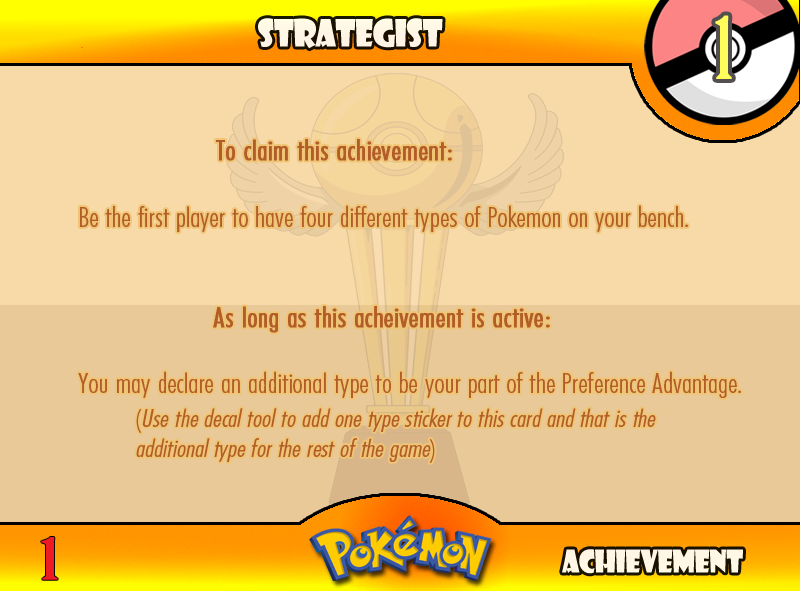
<style>
.page{position:relative;width:800px;height:591px;background:#f8d9a8}
.page>*{position:absolute;margin:0}
.t1{font:83.3px "BirchStd";letter-spacing:0.025em;color:#fffd59;font-weight:bold}
.t2{font:36.7px "ShowcardGothic-Reg";letter-spacing:-0.025em;color:#fff6e6;scale:0.91 1}
.t3{font:25px "FuturaCondensedBQ-Light";color:#b15c29;font-style:italic;scale:1.08 1}
.t4{font:33.3px "FuturaCondensedBQ-Light";color:#b15c29;font-weight:bold;scale:1.08 1}
.t5{font:27.8px "FuturaCondensedBQ-Light";color:#b15c29;font-weight:bold;scale:1.08 1}
.t6{font:27.8px "FuturaCondensedBQ-Light";color:#b15c29;scale:1.08 1}
.t7{font:25px "FuturaCondensedBQ-Light";color:#b15c29;scale:1.08 1}
.t8{font:55.6px "BirchStd";color:#ed1c24;font-weight:bold;scale:1.5 1}
.t9{font:30.6px "ShowcardGothic-Reg";letter-spacing:-0.025em;color:#fff7e6;scale:0.91 1}
</style>
<div class="page">
<p class="t1" style="left:715px;top:15px;width:17px;height:64px">1</p>
<p class="t2" style="left:258px;top:18px;width:185px;height:31px">Strategist</p>
<p class="t3" style="left:78px;top:139px;width:663px;height:324px"><span class="t4">          <br>      </span><span class="t5">To claim this achievement:<br><br></span><span class="t6"> Be the first player to have four different types of Pokemon on your bench.<br><br><br>     </span><span class="t5"> As long as this acheivement is active:<br></span><span class="t6"><br> You may declare an additional type to be your part of the Preference Advantage.<br>  </span><span class="t7">(</span>Use the decal tool to add one type sticker to this card and that is the      additional type for the rest of the game<span class="t7">)</span></p>
<p class="t8" style="left:41px;top:537px;width:17px;height:43px">1</p>
<p class="t9" style="left:562px;top:549px;width:181px;height:25px">Achievement</p>
</div>
